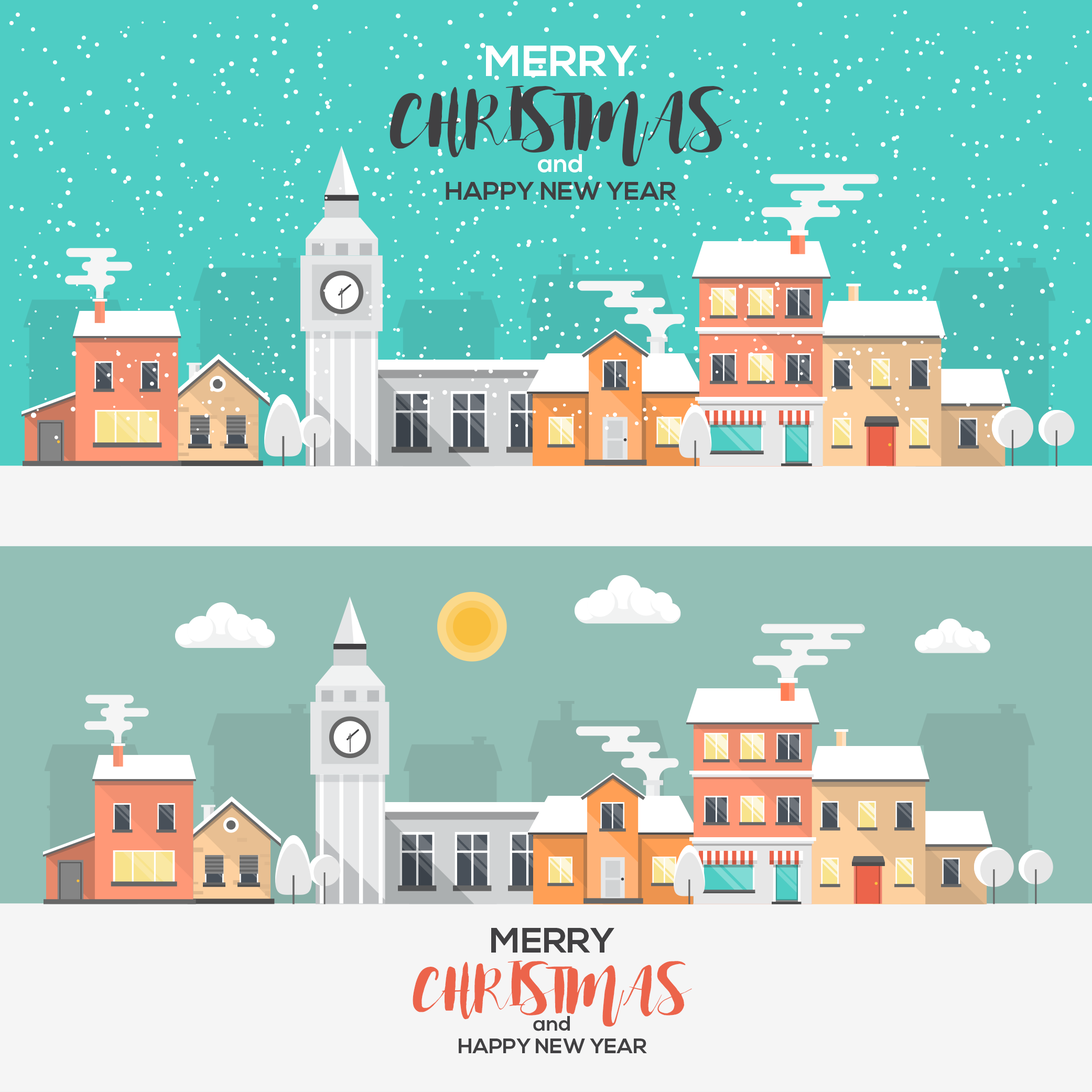
<style>
.page{position:relative;width:1092px;height:1092px;background:#f5f5f5}
.page>*{position:absolute;margin:0}
.t1{font:43.2px "NexaBold";color:#ffffff}
.t2{font:63px "SpellingNight-Regular";color:#414042}
.t3{font:25.4px "NexaBold";color:#ffffff}
.t4{font:25.4px "NexaBold";color:#414042}
.t5{font:35.3px "NexaBold";color:#414042}
.t6{font:51.4px "SpellingNight-Regular";color:#ec644b}
.t7{font:20.7px "NexaBold";color:#414042}
</style>
<div class="page">
<p class="t1" style="left:486px;top:46px;width:150px;height:30px">MERRY</p>
<p class="t2" style="left:390px;top:85px;width:341px;height:82px">CHRISTMAS</p>
<p class="t3" style="left:538px;top:154px;width:44px;height:18px">and</p>
<p class="t4" style="left:446px;top:182px;width:230px;height:18px">HAPPY NEW YEAR</p>
<p class="t5" style="left:491px;top:928px;width:123px;height:25px">MERRY</p>
<p class="t6" style="left:413px;top:960px;width:279px;height:67px">CHRISTMAS</p>
<p class="t7" style="left:533px;top:1016px;width:37px;height:15px">and</p>
<p class="t7" style="left:459px;top:1039px;width:188px;height:14px">HAPPY NEW YEAR</p>
</div>
